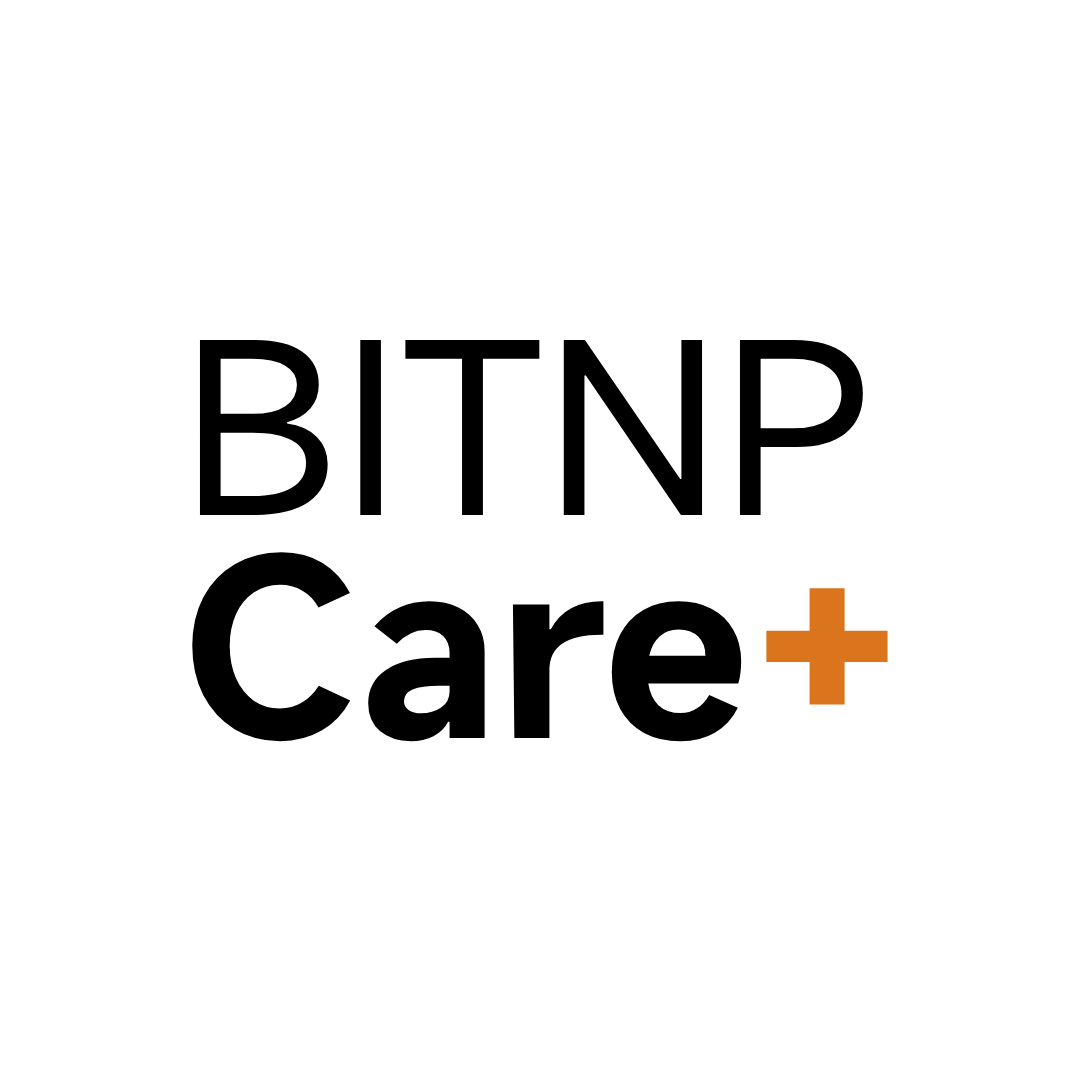
<style>
.page{position:relative;width:1080px;height:1080px;background:#ffffff}
.page>*{position:absolute;margin:0}
.t1{font:230.4px/220px "MiSans-Regular";color:#000000;scale:1.04 1}
.t2{font:230.4px/220px "MiSans-Semibold";color:#000000;scale:1.04 1}
.t3{font:230.4px/220px "MiSans-Semibold";color:#da751d;scale:1.04 1}
</style>
<div class="page">
<p class="t1" style="left:192px;top:339px;width:696px;height:403px">BITNP<span class="t2"><br>Care</span><span class="t3">+</span></p>
</div>
